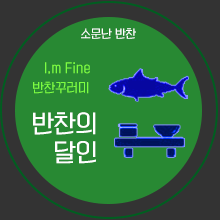
<style>
.page{position:relative;width:220px;height:220px;background:#288933}
.page>*{position:absolute;margin:0}
.t1{font:11px "KoreanYNSJG3-R";color:#ffffff}
.t2{font:12px/19.8px "KoreanYNSJG3-R";color:#7bfc42}
.t3{font:23px/28.6px "KoreanYNSJG3-R";color:#ffffff}
</style>
<div class="page">
<p class="t1" style="left:81px;top:28px;width:55px;height:11px">소문난 반찬</p>
<p class="t2" style="left:33px;top:62px;width:57px;height:32px">I,m Fine<br>반찬꾸러미</p>
<p class="t3" style="left:33px;top:112px;width:63px;height:52px">반찬의 <br>   달인</p>
</div>
